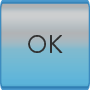
<style>
.page{position:relative;width:90px;height:90px}
.page>*{position:absolute;margin:0}
.t1{font:25px "BrandonGrotesque-Regular";color:#303030}
</style>
<div class="page">
<p class="t1" style="left:28px;top:35px;width:35px;height:18px">OK</p>
</div>
